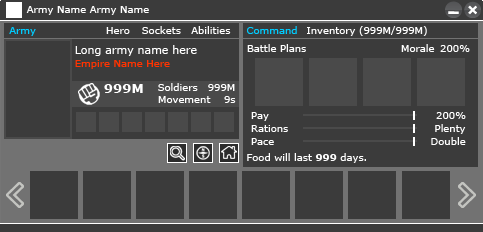
<style>
.page{position:relative;width:483px;height:232px;background:#3b3b3b}
.page>*{position:absolute;margin:0}
.t1{font:10px "Verdana";color:#ffffff}
.t2{font:10px "Verdana";color:#00ccff}
.t3{font:11px "Verdana";color:#ffffff}
.t4{font:10px "Verdana";color:#ff3300}
.t5{font:13px "Verdana-Bold";color:#ffffff}
.t6{font:10px "Verdana";color:#fefefe}
.t7{font:10px "Verdana-Bold";color:#fefefe}
</style>
<div class="page">
<p class="t1" style="left:26px;top:6px;width:123px;height:9px">Army Name Army Name</p>
<p class="t2" style="left:9px;top:27px;width:27px;height:9px">Army</p>
<p class="t1" style="left:106px;top:27px;width:24px;height:7px">Hero</p>
<p class="t1" style="left:142px;top:26px;width:39px;height:8px">Sockets</p>
<p class="t1" style="left:191px;top:26px;width:40px;height:8px">Abilities</p>
<p class="t2" style="left:247px;top:26px;width:50px;height:8px">Command</p>
<p class="t1" style="left:307px;top:26px;width:120px;height:10px">Inventory (999M/999M)</p>
<p class="t3" style="left:75px;top:45px;width:122px;height:11px">Long army name here</p>
<p class="t1" style="left:247px;top:44px;width:59px;height:8px">Battle Plans</p>
<p class="t1" style="left:401px;top:44px;width:34px;height:8px">Morale</p>
<p class="t1" style="left:440px;top:45px;width:30px;height:7px">200%</p>
<p class="t4" style="left:75px;top:60px;width:95px;height:9px">Empire Name Here</p>
<p class="t5" style="left:104px;top:84px;width:39px;height:9px">999M</p>
<p class="t1" style="left:158px;top:83px;width:40px;height:8px">Soldiers</p>
<p class="t1" style="left:208px;top:84px;width:27px;height:7px">999M</p>
<p class="t1" style="left:158px;top:96px;width:53px;height:7px">Movement</p>
<p class="t1" style="left:224px;top:96px;width:12px;height:7px">9s</p>
<p class="t1" style="left:251px;top:112px;width:18px;height:9px">Pay</p>
<p class="t1" style="left:436px;top:112px;width:30px;height:7px">200%</p>
<p class="t1" style="left:251px;top:125px;width:37px;height:7px">Rations</p>
<p class="t1" style="left:435px;top:124px;width:31px;height:10px">Plenty</p>
<p class="t1" style="left:431px;top:137px;width:35px;height:8px">Double</p>
<p class="t1" style="left:251px;top:138px;width:23px;height:7px">Pace</p>
<p class="t6" style="left:247px;top:153px;width:119px;height:10px">Food will last <span class="t7">999 </span>days.</p>
</div>
